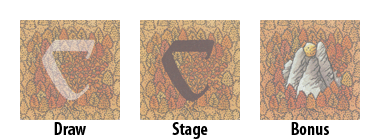
<style>
.page{position:relative;width:380px;height:140px;background:#ffffff}
.page>*{position:absolute;margin:0}
.t1{font:18px "MyriadPro-BoldCond";color:#000000}
</style>
<div class="page">
<p class="t1" style="left:54px;top:122px;width:32px;height:13px">Draw</p>
<p class="t1" style="left:172px;top:122px;width:36px;height:17px">Stage</p>
<p class="t1" style="left:291px;top:122px;width:38px;height:13px">Bonus</p>
</div>
